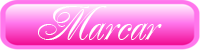
<style>
.page{position:relative;width:200px;height:50px}
.page>*{position:absolute;margin:0}
.t1{font:48px "Renaissance-Regular";color:#ffffff}
</style>
<div class="page">
<p class="t1" style="left:38px;top:6px;width:124px;height:34px">Marcar</p>
</div>
